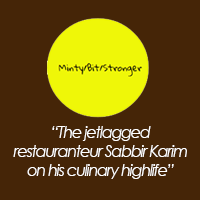
<style>
.page{position:relative;width:200px;height:200px;background:#452507}
.page>*{position:absolute;margin:0}
.t1{font:16px "CenturyGothic-Italic";letter-spacing:-0.075em;color:#ffffff}
</style>
<div class="page">
<p class="t1" style="left:13px;top:126px;width:174px;height:53px;text-align:center">“The jetlagged<br>restauranteur Sabbir Karim<br>on his culinary highlife”</p>
</div>
